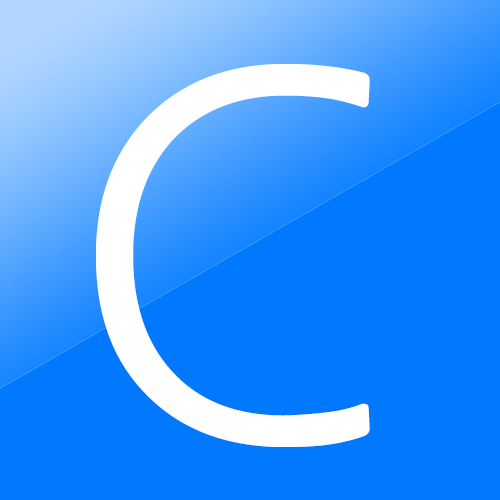
<style>
.page{position:relative;width:500px;height:500px;background:#0079ff}
.page>*{position:absolute;margin:0}
.t1{font:500px "NanumGothic";color:#ffffff}
</style>
<div class="page">
<p class="t1" style="left:95px;top:64px;width:275px;height:383px">C</p>
</div>
